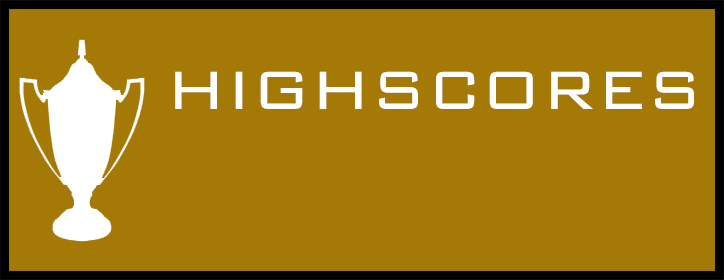
<style>
.page{position:relative;width:724px;height:280px;background:#a47905}
.page>*{position:absolute;margin:0}
.t1{font:71.7px "BankGothic-Light";color:#ffffff}
</style>
<div class="page">
<p class="t1" style="left:175px;top:71px;width:519px;height:38px">HIGHSCORES</p>
</div>
